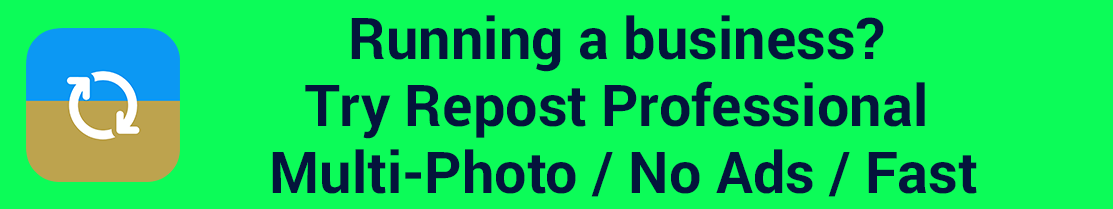
<style>
.page{position:relative;width:1113px;height:209px;background:#0cfc58}
.page>*{position:absolute;margin:0}
.t1{font:57.6px "Roboto-Bold";color:#04143c}
</style>
<div class="page">
<p class="t1" style="left:351px;top:15px;width:533px;height:57px">Running a business?</p>
<p class="t1" style="left:305px;top:81px;width:620px;height:58px">Try Repost Professional</p>
<p class="t1" style="left:272px;top:149px;width:705px;height:48px">Multi-Photo / No Ads / Fast</p>
</div>
